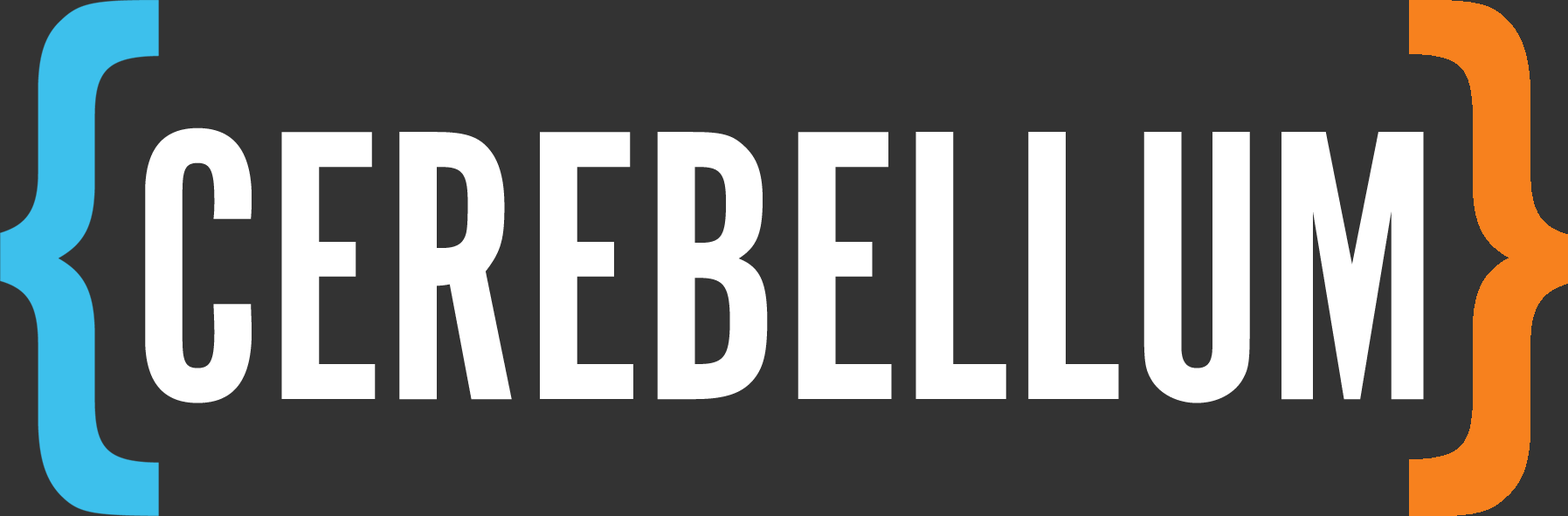
<style>
.page{position:relative;width:1568px;height:516px;background:#333333}
.page>*{position:absolute;margin:0}
.t1{font:666.1px "AlternateGotNo1D";color:#3dc0ec}
.t2{font:400.4px "AlternateGotNo1D";color:#ffffff}
</style>
<div class="page">
<p class="t1" style="left:0px;top:0px;width:159px;height:516px">{</p>
<p class="t2" style="left:145px;top:128px;width:1279px;height:276px">CEREBELLUM</p>
</div>
